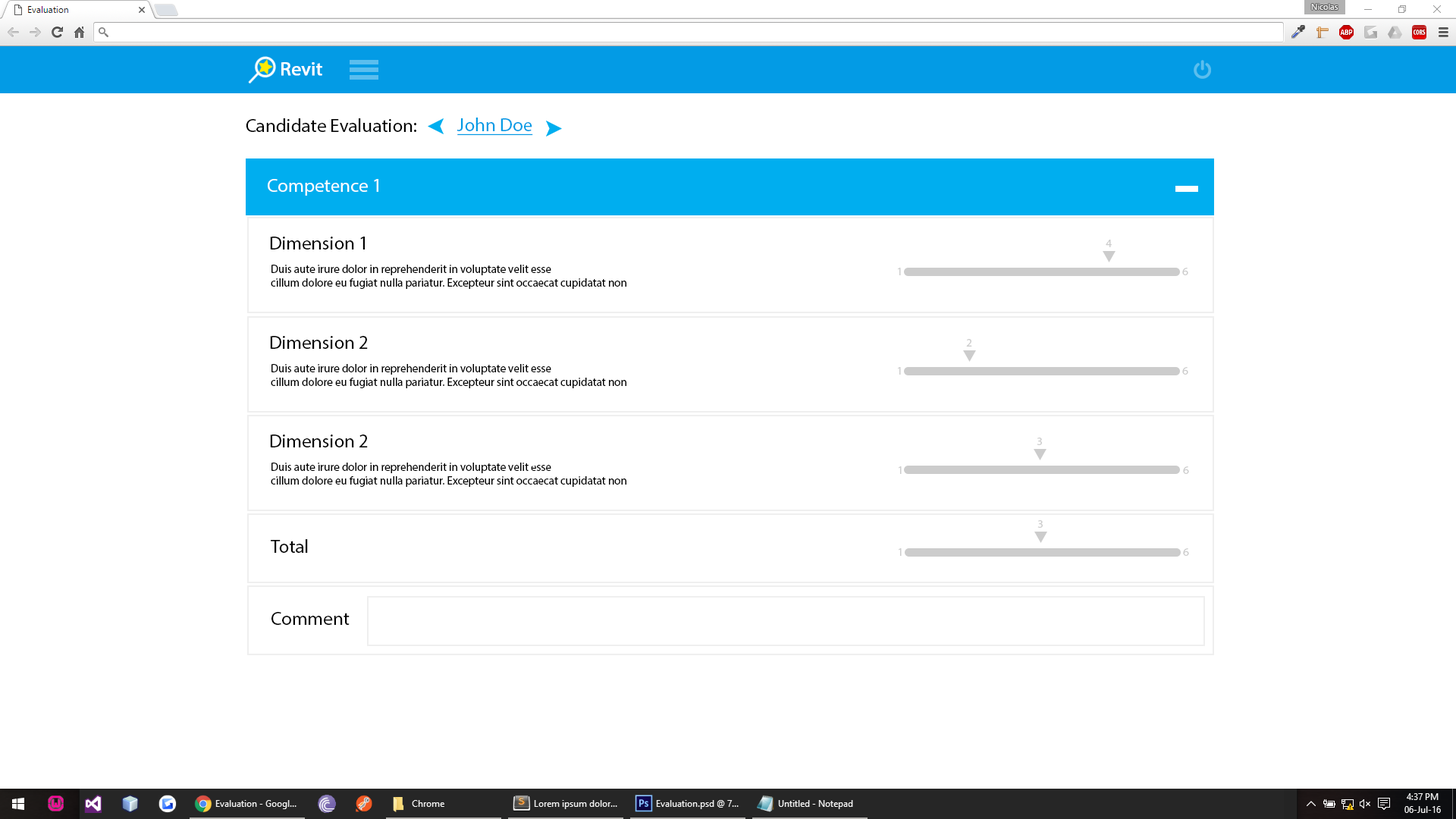
<style>
.page{position:relative;width:1456px;height:819px;background:#ffffff}
.page>*{position:absolute;margin:0}
.t1{font:19px "MyriadPro-Regular";color:#ffffff;font-weight:bold}
.t2{font:19px "MyriadPro-Regular";color:#000000}
.t3{font:19px "MyriadPro-Regular";color:#039be5;text-decoration:underline}
.t4{font:19px "MyriadPro-Regular";color:#ffffff}
.t5{font:11.4px "MyriadPro-Regular";color:#cccccc}
.t6{font:11.4px "MyriadPro-Regular";color:#000000}
</style>
<div class="page">
<p class="t1" style="left:281px;top:62px;width:41px;height:14px">Revit</p>
<p class="t2" style="left:246px;top:118px;width:170px;height:14px">Candidate Evaluation:</p>
<p class="t3" style="left:457px;top:118px;width:76px;height:18px">John Doe</p>
<p class="t4" style="left:268px;top:179px;width:110px;height:17px">Competence 1</p>
<p class="t2" style="left:270px;top:237px;width:95px;height:12px">Dimension 1</p>
<p class="t5" style="left:1106px;top:240px;width:6px;height:7px">4</p>
<p class="t6" style="left:271px;top:265px;width:355px;height:24px">Duis aute irure dolor in reprehenderit in voluptate velit esse<br>cillum dolore eu fugiat nulla pariatur. Excepteur sint occaecat cupidatat non</p>
<p class="t5" style="left:898px;top:268px;width:3px;height:7px">1</p>
<p class="t5" style="left:1182px;top:268px;width:6px;height:7px">6</p>
<p class="t2" style="left:270px;top:336px;width:98px;height:13px">Dimension 2</p>
<p class="t5" style="left:966px;top:339px;width:6px;height:8px">2</p>
<p class="t6" style="left:271px;top:364px;width:355px;height:24px">Duis aute irure dolor in reprehenderit in voluptate velit esse<br>cillum dolore eu fugiat nulla pariatur. Excepteur sint occaecat cupidatat non</p>
<p class="t5" style="left:898px;top:367px;width:3px;height:8px">1</p>
<p class="t5" style="left:1182px;top:367px;width:6px;height:8px">6</p>
<p class="t2" style="left:270px;top:435px;width:98px;height:12px">Dimension 2</p>
<p class="t5" style="left:1037px;top:438px;width:5px;height:7px">3</p>
<p class="t6" style="left:271px;top:463px;width:355px;height:24px">Duis aute irure dolor in reprehenderit in voluptate velit esse<br>cillum dolore eu fugiat nulla pariatur. Excepteur sint occaecat cupidatat non</p>
<p class="t5" style="left:899px;top:466px;width:3px;height:8px">1</p>
<p class="t5" style="left:1183px;top:466px;width:6px;height:8px">6</p>
<p class="t5" style="left:1037px;top:520px;width:6px;height:8px">3</p>
<p class="t2" style="left:271px;top:539px;width:37px;height:14px">Total</p>
<p class="t5" style="left:899px;top:548px;width:3px;height:8px">1</p>
<p class="t5" style="left:1183px;top:548px;width:6px;height:8px">6</p>
<p class="t2" style="left:271px;top:612px;width:79px;height:13px">Comment</p>
</div>
